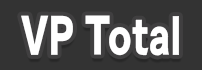
<style>
.page{position:relative;width:202px;height:70px;background:#333333}
.page>*{position:absolute;margin:0}
.t1{font:46.3px "TsukuGoPro-U";letter-spacing:0.017em;color:#ffffff;scale:0.69 1}
</style>
<div class="page">
<p class="t1" style="left:21px;top:15px;width:158px;height:41px">VP Total</p>
</div>
